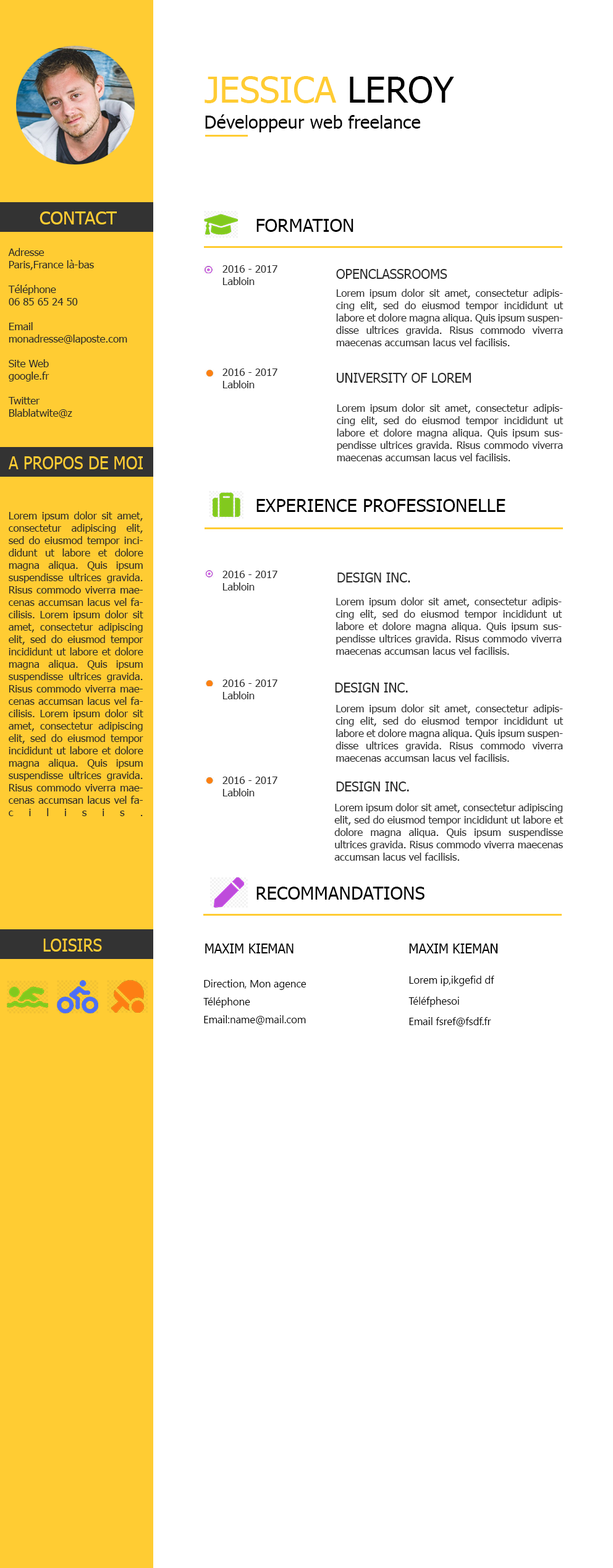
<style>
.page{position:relative;width:613px;height:1568px;background:#ffffff}
.page>*{position:absolute;margin:0}
.t1{font:18px/25.8px "Tahoma";color:#000000}
.t2{font:36.1px "Tahoma";color:#ffcc33}
.t3{font:36.1px "Tahoma";color:#000000}
.t4{font:18px "Tahoma";color:#ffcc33}
.t5{font:18px "Tahoma";color:#000000}
.t6{font:10.3px "Tahoma";color:#282828}
.t7{font:12.9px "Tahoma";color:#282828}
.t8{font:18px "Tahoma";color:#ffcc33;scale:0.9 1}
.t9{font:12.9px "Tahoma";color:#000000}
.t10{font:10.3px/20.6px "YuGothicUI-Regular";color:#000000}
.t11{font:10.3px/18px "YuGothicUI-Regular";color:#000000}
</style>
<div class="page">
<p class="t1" style="left:205px;top:76px;width:249px;height:56px"><span class="t2">JESSICA </span><span class="t3">LEROY<br></span>Développeur web freelance</p>
<p class="t4" style="left:40px;top:211px;width:77px;height:13px">CONTACT</p>
<p class="t5" style="left:257px;top:219px;width:97px;height:13px">FORMATION</p>
<p class="t6" style="left:8px;top:248px;width:119px;height:170px">Adresse<br>Paris,France là-bas<br><br>Téléphone<br>06 85 65 24 50<br><br>Email<br>monadresse@laposte.com<br><br>Site Web<br>google.fr<br><br>Twitter<br>Blablatwite@z</p>
<p class="t6" style="left:223px;top:265px;width:55px;height:20px">2016 - 2017<br>Labloin</p>
<p class="t7" style="left:336px;top:269px;width:112px;height:10px">OPENCLASSROOMS</p>
<p class="t6" style="left:336px;top:289px;width:228px;height:57px;text-align:justify">Lorem ipsum dolor sit amet, consectetur adipiscing elit, sed do eiusmod tempor incididunt ut labore et dolore magna aliqua. Quis ipsum suspendisse ultrices gravida. Risus commodo viverra maecenas accumsan lacus vel facilisis.</p>
<p class="t6" style="left:223px;top:369px;width:55px;height:19px">2016 - 2017<br>Labloin</p>
<p class="t7" style="left:337px;top:373px;width:134px;height:10px">UNIVERSITY OF LOREM</p>
<p class="t6" style="left:337px;top:404px;width:227px;height:57px;text-align:justify">Lorem ipsum dolor sit amet, consectetur adipiscing elit, sed do eiusmod tempor incididunt ut labore et dolore magna aliqua. Quis ipsum suspendisse ultrices gravida. Risus commodo viverra maecenas accumsan lacus vel facilisis.</p>
<p class="t8" style="left:9px;top:456px;width:134px;height:13px">A PROPOS DE MOI</p>
<p class="t5" style="left:257px;top:499px;width:249px;height:13px">EXPERIENCE PROFESSIONELLE</p>
<p class="t6" style="left:9px;top:511px;width:134px;height:305px;text-align:justify">Lorem ipsum dolor sit amet, consectetur adipiscing elit, sed do eiusmod tempor incididunt ut labore et dolore magna aliqua. Quis ipsum suspendisse ultrices gravida. Risus commodo viverra maecenas accumsan lacus vel facilisis. Lorem ipsum dolor sit amet, consectetur adipiscing elit, sed do eiusmod tempor incididunt ut labore et dolore magna aliqua. Quis ipsum suspendisse ultrices gravida. Risus commodo viverra maecenas accumsan lacus vel facilisis. Lorem ipsum dolor sit amet, consectetur adipiscing elit, sed do eiusmod tempor incididunt ut labore et dolore magna aliqua. Quis ipsum suspendisse ultrices gravida. Risus commodo viverra maecenas accumsan lacus vel facilisis.</p>
<p class="t6" style="left:223px;top:571px;width:55px;height:19px">2016 - 2017<br>Labloin</p>
<p class="t7" style="left:338px;top:573px;width:73px;height:9px">DESIGN INC.</p>
<p class="t6" style="left:336px;top:597px;width:227px;height:58px;text-align:justify">Lorem ipsum dolor sit amet, consectetur adipiscing elit, sed do eiusmod tempor incididunt ut labore et dolore magna aliqua. Quis ipsum suspendisse ultrices gravida. Risus commodo viverra maecenas accumsan lacus vel facilisis.</p>
<p class="t6" style="left:223px;top:680px;width:55px;height:19px">2016 - 2017<br>Labloin</p>
<p class="t7" style="left:335px;top:683px;width:73px;height:9px">DESIGN INC.</p>
<p class="t6" style="left:336px;top:704px;width:228px;height:58px;text-align:justify">Lorem ipsum dolor sit amet, consectetur adipiscing elit, sed do eiusmod tempor incididunt ut labore et dolore magna aliqua. Quis ipsum suspendisse ultrices gravida. Risus commodo viverra maecenas accumsan lacus vel facilisis.</p>
<p class="t6" style="left:223px;top:777px;width:55px;height:19px">2016 - 2017<br>Labloin</p>
<p class="t7" style="left:336px;top:782px;width:73px;height:9px">DESIGN INC.</p>
<p class="t6" style="left:334px;top:803px;width:230px;height:58px;text-align:justify">Lorem ipsum dolor sit amet, consectetur adipiscing elit, sed do eiusmod tempor incididunt ut labore et dolore magna aliqua. Quis ipsum suspendisse ultrices gravida. Risus commodo viverra maecenas accumsan lacus vel facilisis.</p>
<p class="t5" style="left:257px;top:887px;width:168px;height:13px">RECOMMANDATIONS</p>
<p class="t8" style="left:43px;top:939px;width:59px;height:13px">LOISIRS</p>
<p class="t9" style="left:205px;top:944px;width:89px;height:9px">MAXIM KIEMAN</p>
<p class="t9" style="left:409px;top:944px;width:89px;height:9px">MAXIM KIEMAN</p>
<p class="t10" style="left:409px;top:976px;width:86px;height:50px"><span class="t11">L</span>orem ip,ikgefid df<br>Téléfphesoi<br>Email fsref@fsdf.fr</p>
<p class="t11" style="left:203px;top:979px;width:104px;height:46px">Direction, Mon agence<br>Téléphone<br>Email:name@mail.com</p>
</div>
